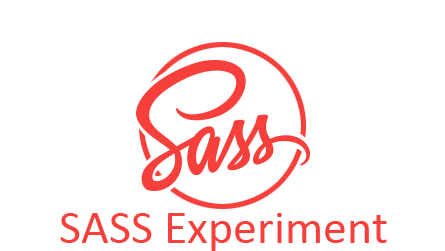
<style>
.page{position:relative;width:445px;height:251px;background:#ffffff}
.page>*{position:absolute;margin:0}
.t1{font:48px "Calibri";color:#f7403c}
</style>
<div class="page">
<p class="t1" style="left:60px;top:213px;width:327px;height:38px">SASS Experiment</p>
</div>
